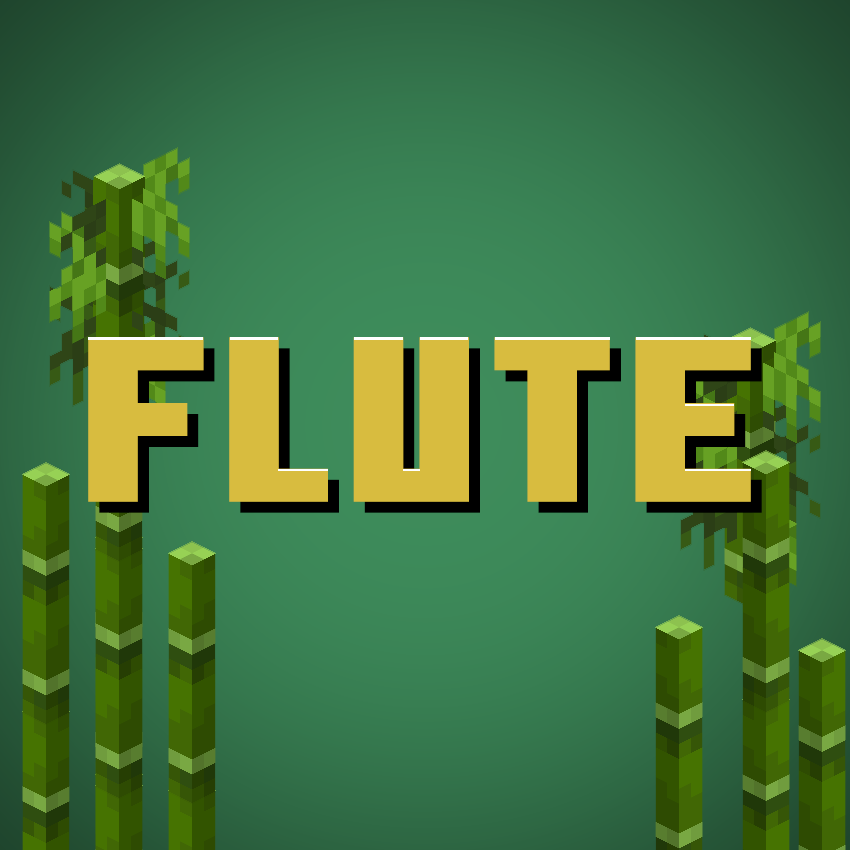
<style>
.page{position:relative;width:850px;height:850px}
.page>*{position:absolute;margin:0}
.t1{font:234.9px "MinecraftTen";letter-spacing:0.01em;color:#d8bc3f}
</style>
<div class="page">
<p class="t1" style="left:88px;top:337px;width:663px;height:165px">FLUTE</p>
<p class="t1" style="left:99px;top:348px;width:663px;height:165px">FLUTE</p>
</div>
